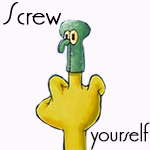
<style>
.page{position:relative;width:150px;height:150px;background:#fcf8fc}
.page>*{position:absolute;margin:0}
.t1{font:33.3px "PremierLightlineStd";color:#040004;font-weight:bold}
.t2{font:25px "PremierLightlineStd";color:#040004;font-weight:bold}
</style>
<div class="page">
<p class="t1" style="left:3px;top:2px;width:58px;height:23px">Screw</p>
<p class="t2" style="left:90px;top:122px;width:60px;height:28px">yourself</p>
</div>
